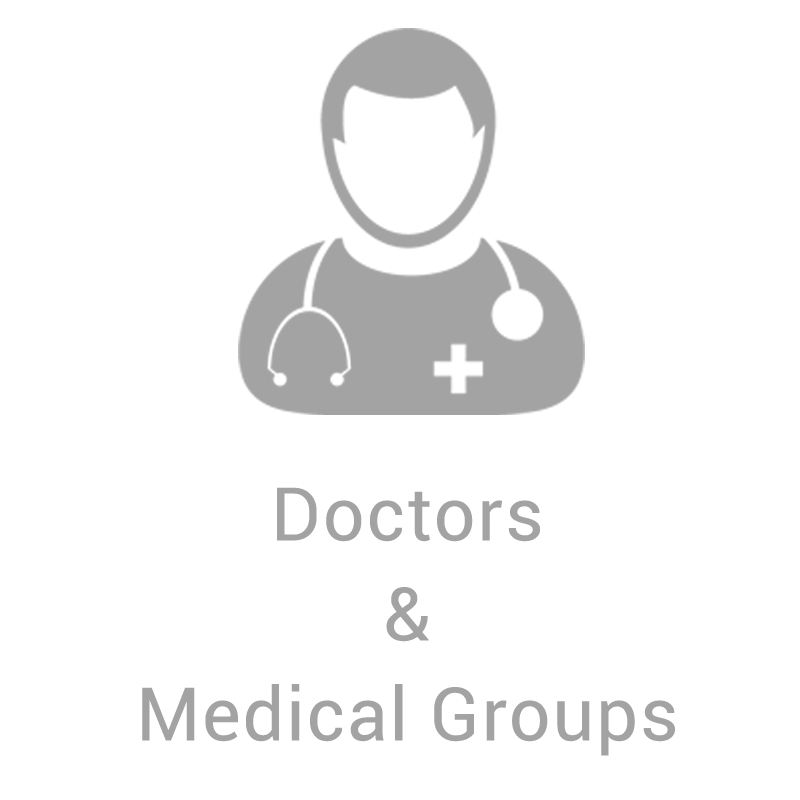
<style>
.page{position:relative;width:800px;height:800px;background:#ffffff}
.page>*{position:absolute;margin:0}
.t1{font:73.7px/100px "Roboto-Regular";letter-spacing:0.025em;color:#a3a3a3}
</style>
<div class="page">
<p class="t1" style="left:142px;top:487px;width:533px;height:269px;text-align:center">Doctors<br>&amp;<br>Medical Groups</p>
</div>
